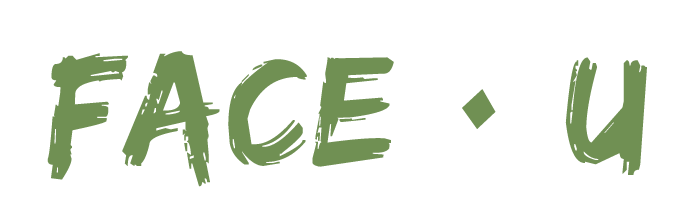
<style>
.page{position:relative;width:690px;height:223px;background:#ffffff}
.page>*{position:absolute;margin:0}
.t1{font:162.5px "Edo";letter-spacing:0.025em;color:#709053}
.t2{font:162.5px "HYChengXingJ";letter-spacing:0.025em;color:#709053}
</style>
<div class="page">
<p class="t1" style="left:47px;top:51px;width:600px;height:136px">Face<span class="t2">·</span>U</p>
</div>
